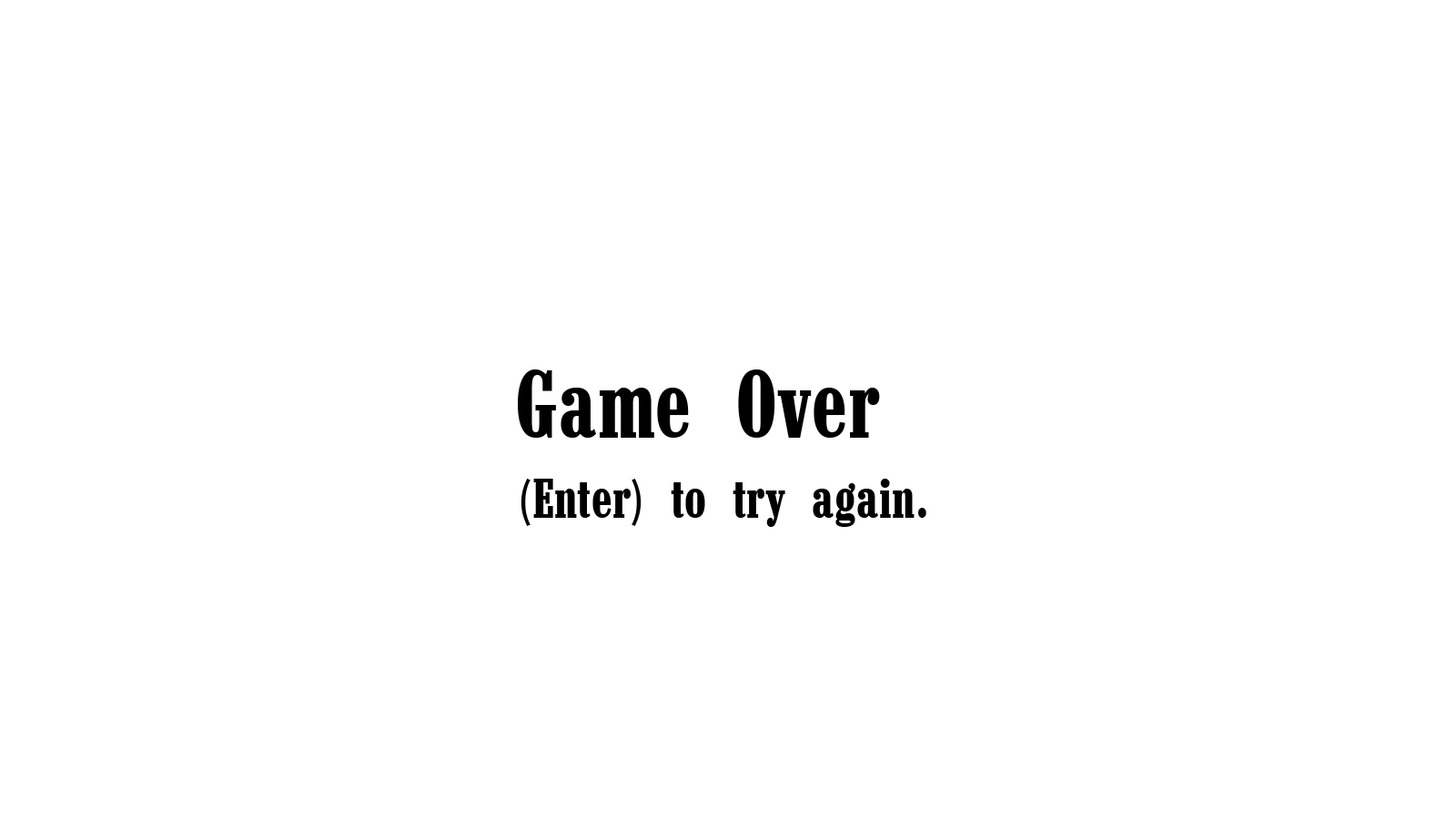
<style>
.page{position:relative;width:1456px;height:819px;background:#ffffff}
.page>*{position:absolute;margin:0}
.t1{font:98.3px "Marlboro";color:#000000}
.t2{font:57.3px "Marlboro";color:#000000}
</style>
<div class="page">
<p class="t1" style="left:518px;top:369px;width:362px;height:69px">Game Over</p>
<p class="t2" style="left:521px;top:479px;width:405px;height:48px">(Enter) to try again.</p>
</div>
